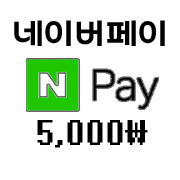
<style>
.page{position:relative;width:180px;height:180px;background:#ffffff}
.page>*{position:absolute;margin:0}
.t1{font:39px "ThecircleB";color:#000000}
.t2{font:40px "System";color:#000000}
</style>
<div class="page">
<p class="t1" style="left:14px;top:20px;width:151px;height:26px">네이버페이</p>
<p class="t2" style="left:37px;top:120px;width:111px;height:28px">5,000\</p>
</div>
